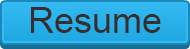
<style>
.page{position:relative;width:190px;height:49px}
.page>*{position:absolute;margin:0}
.t1{font:36px "ArialMT";color:#372f2d}
</style>
<div class="page">
<p class="t1" style="left:31px;top:7px;width:130px;height:26px">Resume</p>
</div>
